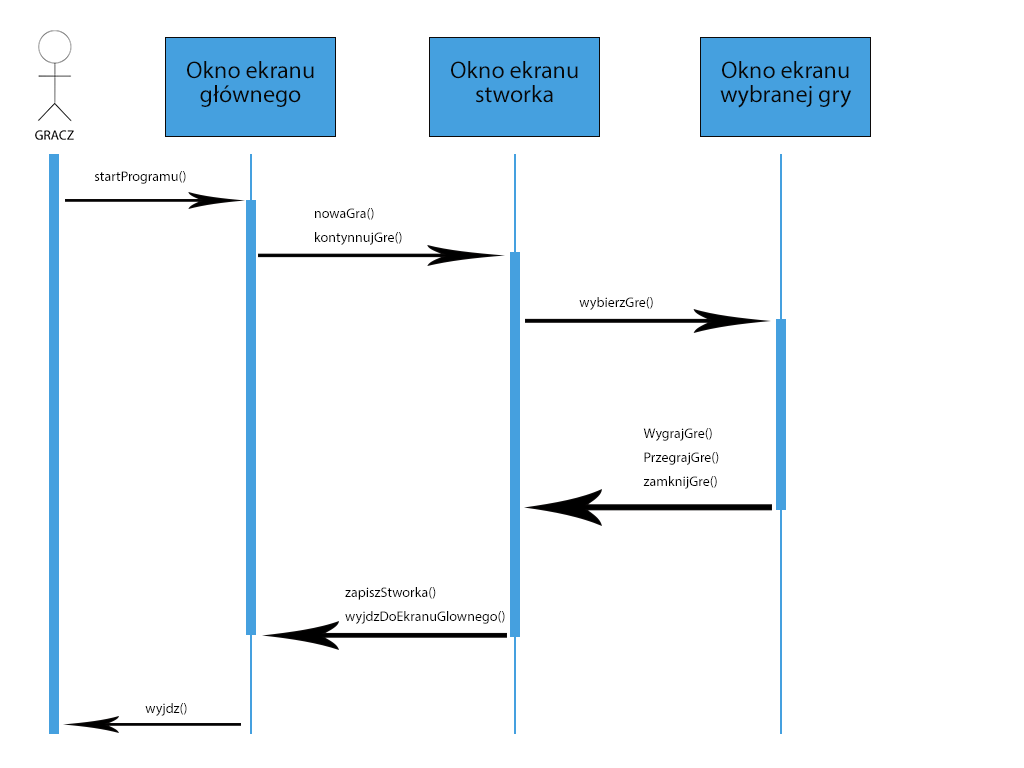
<style>
.page{position:relative;width:1024px;height:768px;background:#ffffff}
.page>*{position:absolute;margin:0}
.t1{font:24px/24px "MyriadPro-Regular";color:#080808}
.t2{font:14px "MyriadPro-Regular";color:#000000}
.t3{font:14px/24px "MyriadPro-Regular";color:#000000}
</style>
<div class="page">
<p class="t1" style="left:187px;top:61px;width:127px;height:46px;text-align:center">Okno ekranu<br>głównego</p>
<p class="t1" style="left:451px;top:61px;width:127px;height:42px;text-align:center">Okno ekranu<br>stworka</p>
<p class="t1" style="left:720px;top:61px;width:132px;height:47px;text-align:center">Okno ekranu<br>wybranej gry</p>
<p class="t2" style="left:94px;top:171px;width:92px;height:13px">startProgramu()</p>
<p class="t3" style="left:315px;top:208px;width:87px;height:37px">nowaGra()<br>kontynnujGre()</p>
<p class="t2" style="left:579px;top:297px;width:74px;height:13px">wybierzGre()</p>
<p class="t3" style="left:643px;top:428px;width:76px;height:61px">WygrajGre()<br>PrzegrajGre()<br>zamknijGre()</p>
<p class="t3" style="left:345px;top:587px;width:160px;height:37px">zapiszStworka()<br>wyjdzDoEkranuGlownego()</p>
<p class="t2" style="left:145px;top:703px;width:42px;height:13px">wyjdz()</p>
</div>
